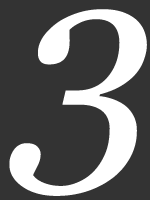
<style>
.page{position:relative;width:150px;height:200px;background:#333333}
.page>*{position:absolute;margin:0}
.t1{font:260px "Georgia-Italic";letter-spacing:-0.05em;color:#ffffff}
</style>
<div class="page">
<p class="t1" style="left:9px;top:9px;width:138px;height:187px">3</p>
</div>
